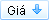
<style>
.page{position:relative;width:49px;height:20px}
.page>*{position:absolute;margin:0}
.t1{font:12px "ArialMT";color:#000000}
</style>
<div class="page">
<p class="t1" style="left:8px;top:5px;width:17px;height:10px">Giá</p>
</div>
